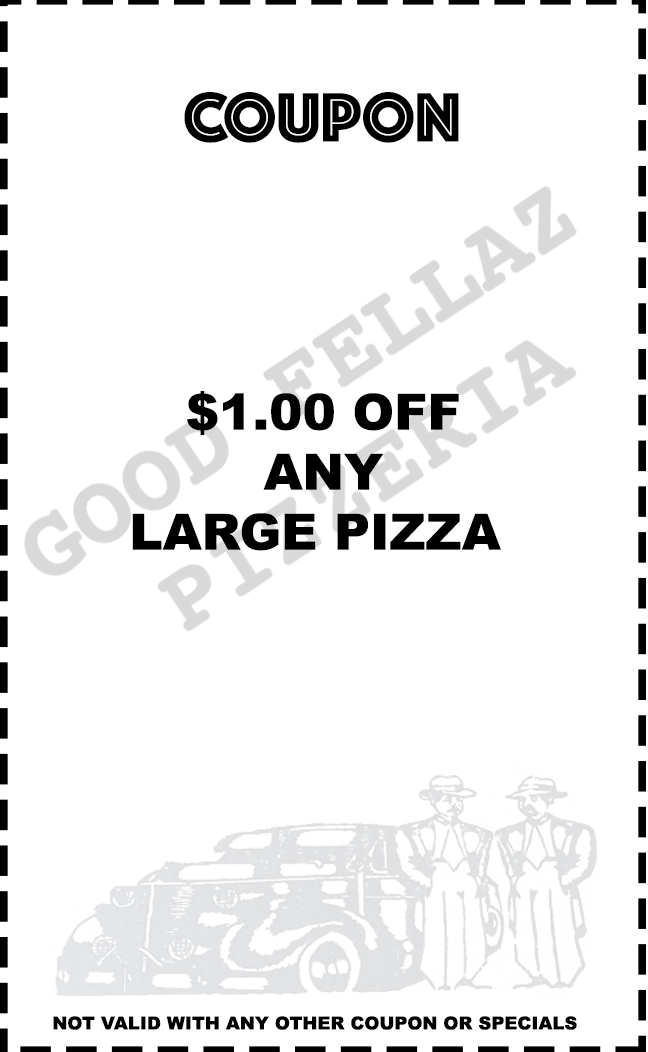
<style>
.page{position:relative;width:648px;height:1052px;background:#ffffff}
.page>*{position:absolute;margin:0}
.t1{font:72px "Phosphate-Inline";color:#000000}
.t2{font:50px "Arial-Black";color:#000000}
.t3{font:18px "Arial-Black";color:#000000}
</style>
<div class="page">
<p class="t1" style="left:184px;top:92px;width:275px;height:51px">COUPON</p>
<p class="t2" style="left:132px;top:391px;width:369px;height:160px;text-align:center">$1.00 OFF<br>ANY<br>LARGE PIZZA</p>
<p class="t3" style="left:53px;top:1016px;width:524px;height:14px">NOT VALID WITH ANY OTHER COUPON OR SPECIALS</p>
</div>
